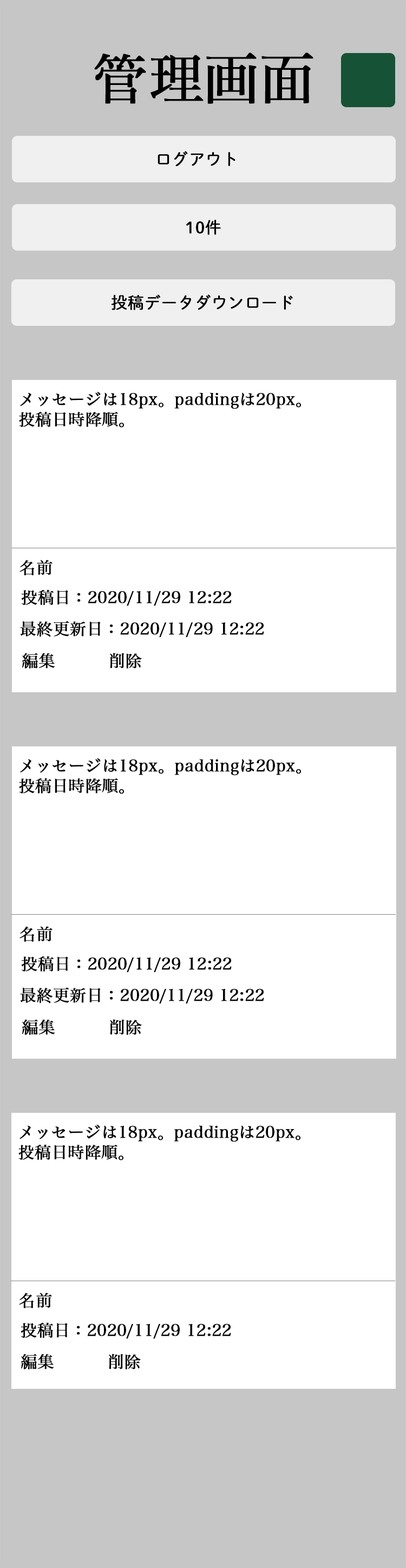
<style>
.page{position:relative;width:406px;height:1568px;background:#ffffff}
.page>*{position:absolute;margin:0}
.t1{font:54.1px "HiraMinPro-W3";color:#000000;font-weight:bold}
.t2{font:16.2px "DNPShueiMGoStd-L";color:#000000;font-weight:bold}
.t3{font:16.2px/20.1px "HiraMinPro-W3";color:#000000;font-weight:bold}
.t4{font:16.2px "HiraMinPro-W3";color:#000000;font-weight:bold}
</style>
<div class="page">
<p class="t1" style="left:94px;top:53px;width:219px;height:51px">管理画面</p>
<p class="t2" style="left:158px;top:151px;width:77px;height:15px">ログアウト</p>
<p class="t2" style="left:186px;top:220px;width:35px;height:15px">10件</p>
<p class="t2" style="left:111px;top:294px;width:182px;height:16px">投稿データダウンロード</p>
<p class="t3" style="left:19px;top:392px;width:282px;height:36px">メッセージは18px。paddingは20px。<br>投稿日時降順。</p>
<p class="t4" style="left:19px;top:560px;width:34px;height:15px">名前</p>
<p class="t4" style="left:21px;top:589px;width:211px;height:17px">投稿日：2020/11/29 12:22</p>
<p class="t4" style="left:20px;top:621px;width:244px;height:17px">最終更新日：2020/11/29 12:22</p>
<p class="t4" style="left:22px;top:653px;width:33px;height:15px">編集</p>
<p class="t4" style="left:110px;top:653px;width:32px;height:15px">削除</p>
<p class="t3" style="left:19px;top:758px;width:282px;height:36px">メッセージは18px。paddingは20px。<br>投稿日時降順。</p>
<p class="t4" style="left:19px;top:926px;width:34px;height:16px">名前</p>
<p class="t4" style="left:21px;top:956px;width:211px;height:17px">投稿日：2020/11/29 12:22</p>
<p class="t4" style="left:20px;top:987px;width:244px;height:17px">最終更新日：2020/11/29 12:22</p>
<p class="t4" style="left:22px;top:1019px;width:33px;height:16px">編集</p>
<p class="t4" style="left:110px;top:1019px;width:32px;height:16px">削除</p>
<p class="t3" style="left:18px;top:1125px;width:282px;height:35px">メッセージは18px。paddingは20px。<br>投稿日時降順。</p>
<p class="t4" style="left:19px;top:1293px;width:33px;height:15px">名前</p>
<p class="t4" style="left:21px;top:1322px;width:210px;height:17px">投稿日：2020/11/29 12:22</p>
<p class="t4" style="left:21px;top:1354px;width:33px;height:15px">編集</p>
<p class="t4" style="left:109px;top:1354px;width:32px;height:15px">削除</p>
</div>
